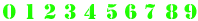
<style>
.page{position:relative;width:198px;height:21px;background:#ffffff}
.page>*{position:absolute;margin:0}
.t1{font:19.9px "StencilStd";color:#1efe00}
.t2{font:19.9px "StencilStd";color:#1eff00}
.t3{font:19.9px "StencilStd";color:#1efd00}
.t4{font:19.9px "StencilStd";color:#1fff01}
</style>
<div class="page">
<p class="t1" style="left:3px;top:4px;width:13px;height:15px">0</p>
<p class="t1" style="left:26px;top:4px;width:8px;height:15px">1</p>
<p class="t1" style="left:44px;top:4px;width:12px;height:15px">2</p>
<p class="t1" style="left:64px;top:4px;width:12px;height:15px">3</p>
<p class="t2" style="left:84px;top:4px;width:12px;height:15px">4</p>
<p class="t3" style="left:107px;top:4px;width:10px;height:15px">5</p>
<p class="t4" style="left:125px;top:4px;width:12px;height:15px">6</p>
<p class="t1" style="left:145px;top:4px;width:10px;height:15px">7</p>
<p class="t2" style="left:166px;top:4px;width:12px;height:15px">8</p>
<p class="t1" style="left:184px;top:4px;width:13px;height:15px">9</p>
</div>
